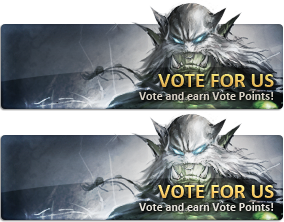
<style>
.page{position:relative;width:284px;height:222px}
.page>*{position:absolute;margin:0}
.t1{font:21px "Calibri-Bold";text-transform:uppercase}
.t2{font:12px "Calibri-Bold";color:#d8d2c6}
.t3{font:12px "Calibri-Bold";color:#e7e4dc}
</style>
<div class="page">
<p class="t1" style="left:158px;top:74px;width:116px;height:13px">vote for us</p>
<p class="t2" style="left:139px;top:91px;width:135px;height:9px">Vote and earn Vote Points!</p>
<p class="t1" style="left:158px;top:185px;width:116px;height:13px">vote for us</p>
<p class="t3" style="left:139px;top:202px;width:135px;height:9px">Vote and earn Vote Points!</p>
</div>
